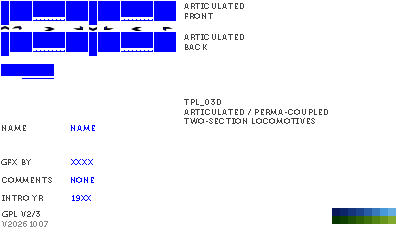
<style>
.page{position:relative;width:400px;height:230px;background:#ffffff}
.page>*{position:absolute;margin:0}
.t1{font:8px "Museo700-Regular";letter-spacing:0.075em;color:#404040;text-transform:uppercase}
.t2{font:8px "Museo700-Regular";letter-spacing:0.075em;color:#0000ff;text-transform:uppercase}
.t3{font:8px "Museo700-Regular";letter-spacing:0.075em;color:#848484;text-transform:uppercase}
</style>
<div class="page">
<p class="t1" style="left:184px;top:3px;width:60px;height:16px">articulated <br>front</p>
<p class="t1" style="left:184px;top:34px;width:60px;height:16px">articulated <br>back</p>
<p class="t1" style="left:184px;top:99px;width:144px;height:25px">tpl_03d<br>Articulated / perma-Coupled <br>Two-Section Locomotives</p>
<p class="t1" style="left:2px;top:125px;width:24px;height:6px">name</p>
<p class="t2" style="left:71px;top:125px;width:24px;height:6px">name</p>
<p class="t1" style="left:1px;top:159px;width:30px;height:6px">gfx by</p>
<p class="t2" style="left:71px;top:159px;width:22px;height:6px">xxxx</p>
<p class="t1" style="left:2px;top:177px;width:50px;height:6px">comments</p>
<p class="t2" style="left:71px;top:177px;width:23px;height:6px">none</p>
<p class="t1" style="left:2px;top:195px;width:41px;height:6px">intro yr</p>
<p class="t2" style="left:72px;top:195px;width:19px;height:6px">19xx</p>
<p class="t3" style="left:2px;top:221px;width:46px;height:6px">v20261007</p>
<p class="t1" style="left:2px;top:211px;width:38px;height:6px">gpl v2/3</p>
</div>
